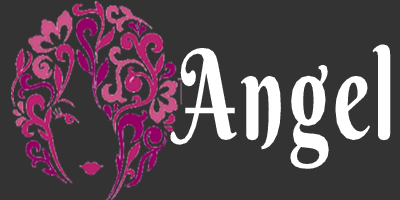
<style>
.page{position:relative;width:400px;height:200px;background:#333333}
.page>*{position:absolute;margin:0}
.t1{font:124.6px "BerkshireSwash-Regular";letter-spacing:0.05em;color:#ffffff;scale:0.64 1}
</style>
<div class="page">
<p class="t1" style="left:170px;top:44px;width:221px;height:125px">Angel</p>
</div>
